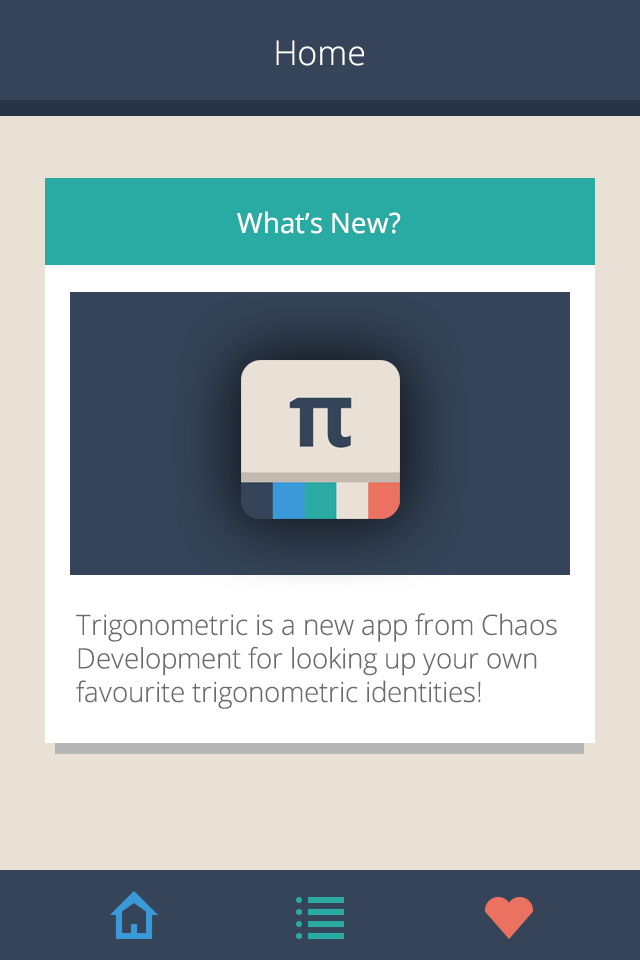
<style>
.page{position:relative;width:640px;height:960px;background:#354458}
.page>*{position:absolute;margin:0}
.t1{font:34px "OpenSans-Light";color:#ffffff}
.t2{font:28px "OpenSans";color:#ffffff}
.t3{font:28px "OpenSans-Light";color:#6b6b6b}
</style>
<div class="page">
<p class="t1" style="left:276px;top:40px;width:88px;height:26px">Home</p>
<p class="t2" style="left:237px;top:211px;width:164px;height:23px">What’s New?</p>
<p class="t3" style="left:76px;top:613px;width:481px;height:96px">Trigonometric is a new app from Chaos <br>Development for looking up your own <br>favourite trigonometric identities!</p>
</div>
